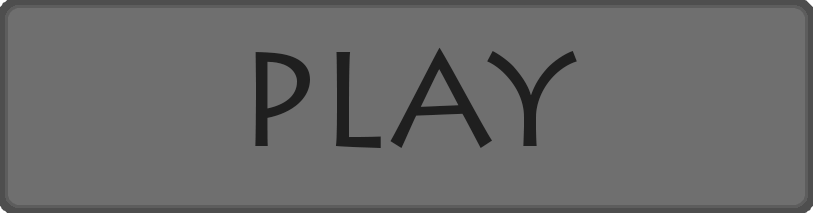
<style>
.page{position:relative;width:813px;height:213px;background:#6f6f6f}
.page>*{position:absolute;margin:0}
.t1{font:133.3px "LithosPro-Regular";color:#1f1f1f}
</style>
<div class="page">
<p class="t1" style="left:255px;top:47px;width:322px;height:102px">PLAY</p>
</div>
